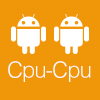
<style>
.page{position:relative;width:100px;height:100px;background:#f09609}
.page>*{position:absolute;margin:0}
.t1{font:22px "Helvetica-Light";letter-spacing:-0.04em;color:#fffbfb}
</style>
<div class="page">
<p class="t1" style="left:8px;top:61px;width:83px;height:21px">Cpu-Cpu</p>
</div>
